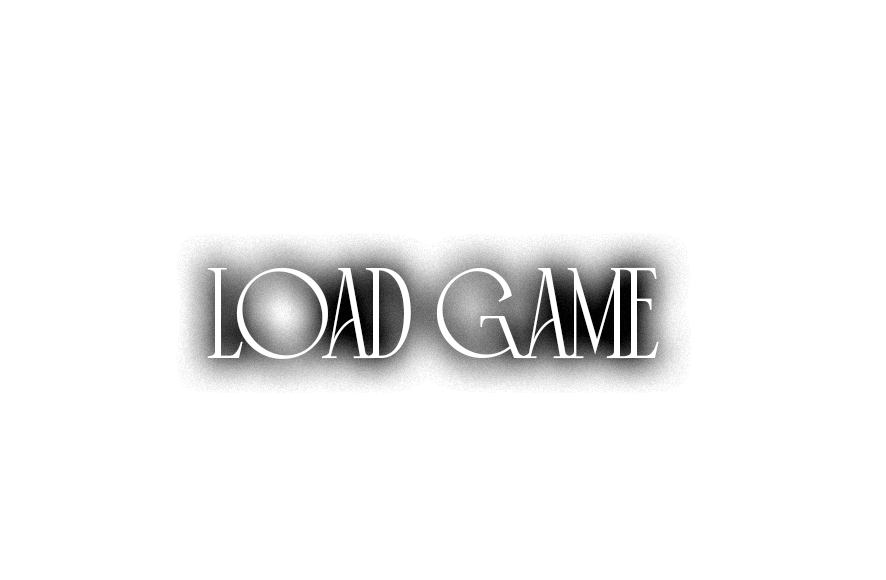
<style>
.page{position:relative;width:886px;height:580px;background:#ffffff}
.page>*{position:absolute;margin:0}
.t1{font:125px "Cyrano-DEMO";color:#ffffff}
</style>
<div class="page">
<p class="t1" style="left:207px;top:267px;width:452px;height:92px">load game</p>
</div>
